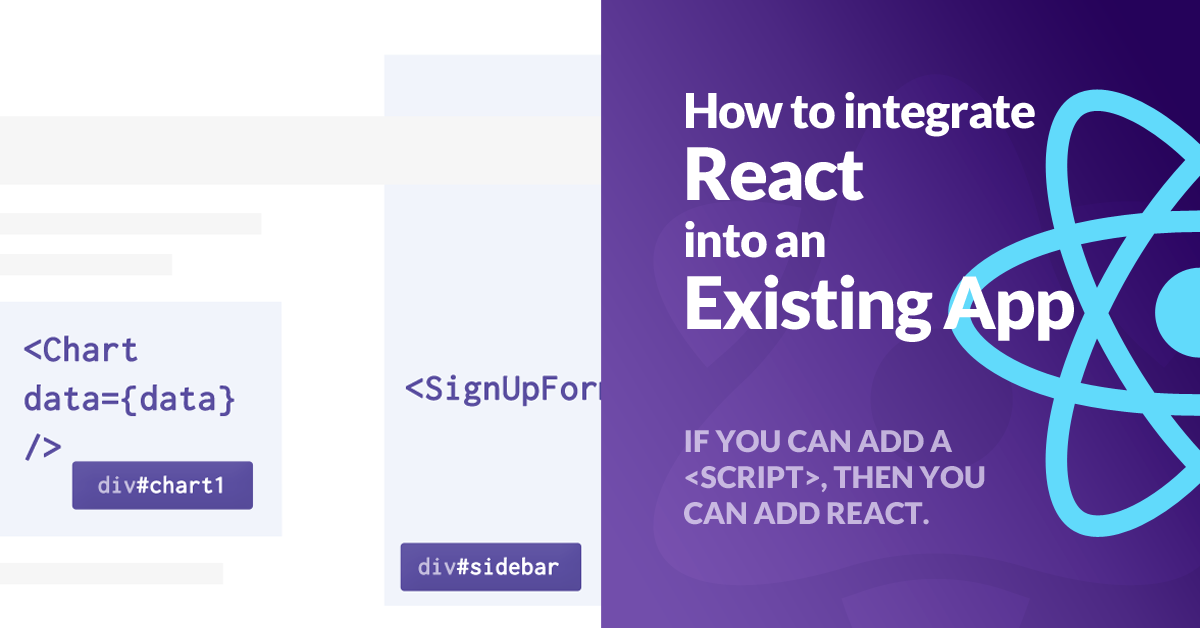
<style>
.page{position:relative;width:1200px;height:628px;background:#ffffff}
.page>*{position:absolute;margin:0}
.t1{font:48px "Lato-Black";letter-spacing:-0.025em;color:#ffffff}
.t2{font:72px/72px "Lato-Black";letter-spacing:-0.025em;color:#ffffff}
.t3{font:30px "Lato-Black";color:#c6b6df}
</style>
<div class="page">
<p class="t1" style="left:685px;top:92px;width:389px;height:250px">How to integrate<br><span class="t2">React<br></span>into an<br><span class="t2">Existing App</span></p>
<p class="t3" style="left:684px;top:430px;width:301px;height:95px">IF YOU CAN ADD A<br>&lt;SCRIPT&gt;, THEN YOU<br>CAN ADD REACT.</p>
</div>
